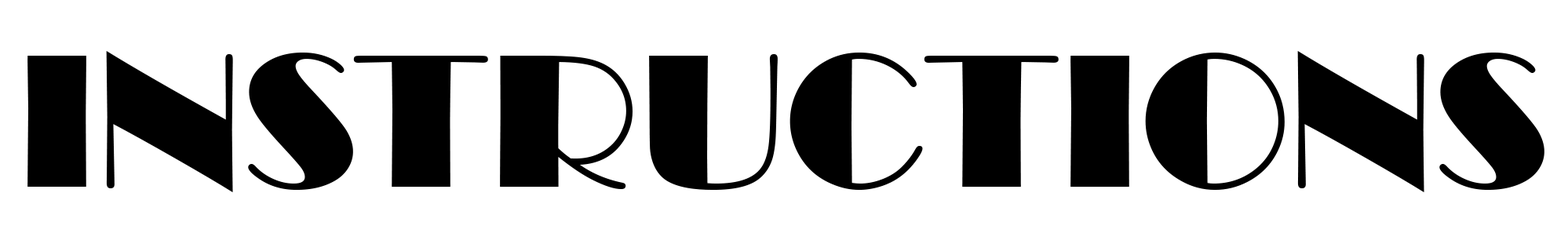
<style>
.page{position:relative;width:1568px;height:233px;background:#ffffff}
.page>*{position:absolute;margin:0}
.t1{font:196.2px "Broadway";color:#000000}
</style>
<div class="page">
<p class="t1" style="left:27px;top:51px;width:1517px;height:141px">INSTRUCTIONS</p>
</div>
